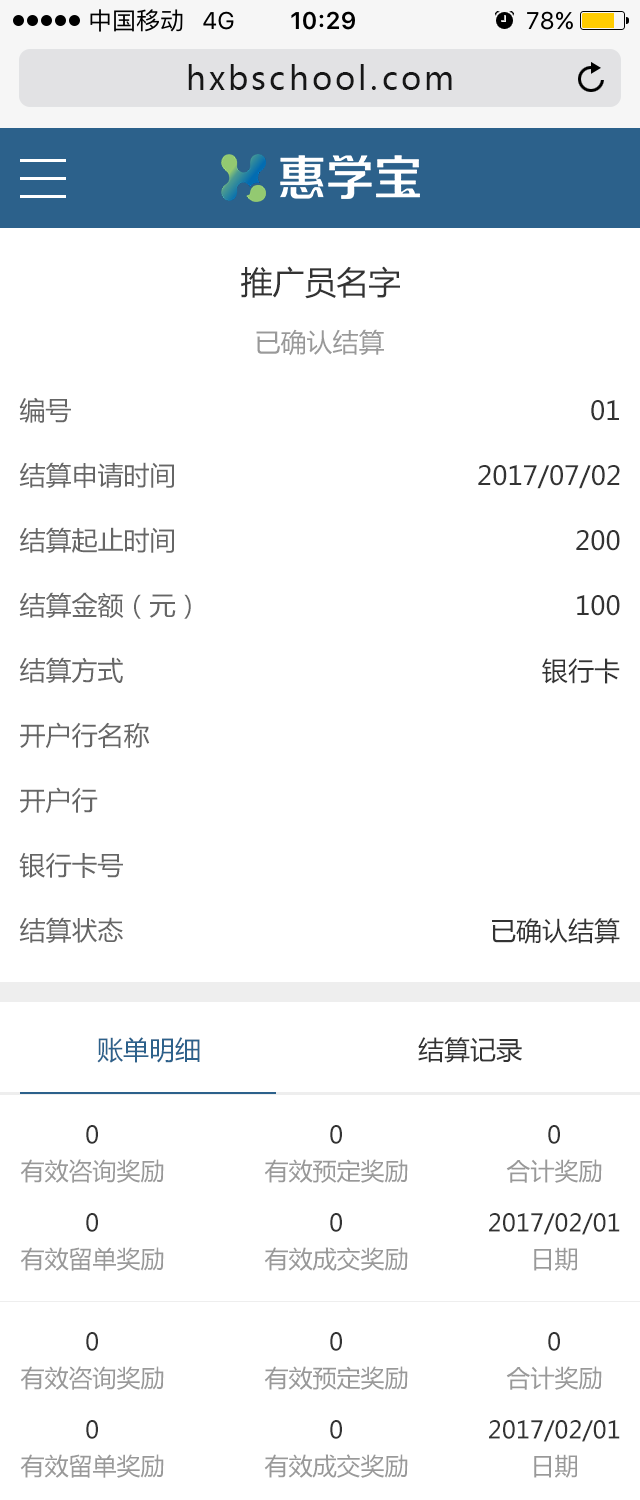
<style>
.page{position:relative;width:640px;height:1500px;background:#ffffff}
.page>*{position:absolute;margin:0}
.t1{font:32px "MicrosoftYaHei";letter-spacing:0.1em;color:#171717}
.t2{font:32px "MicrosoftYaHei";color:#333333}
.t3{font:26px "MicrosoftYaHei";color:#999999}
.t4{font:26px "MicrosoftYaHei";color:#666666}
.t5{font:26px "MicrosoftYaHei";color:#333333}
.t6{font:26px "MicrosoftYaHei";color:#2c618b}
.t7{font:24px/36px "MicrosoftYaHei";color:#999999}
.t8{font:24px/36px "MicrosoftYaHei";color:#333333}
</style>
<div class="page">
<p class="t1" style="left:188px;top:64px;width:264px;height:26px">hxbschool.com</p>
<p class="t2" style="left:241px;top:266px;width:159px;height:33px">推广员名字</p>
<p class="t3" style="left:256px;top:329px;width:128px;height:27px">已确认结算</p>
<p class="t4" style="left:19px;top:397px;width:52px;height:26px">编号</p>
<p class="t5" style="left:591px;top:400px;width:28px;height:21px">01</p>
<p class="t4" style="left:19px;top:462px;width:155px;height:26px">结算申请时间</p>
<p class="t5" style="left:478px;top:465px;width:142px;height:24px">2017/07/02</p>
<p class="t4" style="left:19px;top:527px;width:155px;height:27px">结算起止时间</p>
<p class="t5" style="left:576px;top:530px;width:44px;height:21px">200</p>
<p class="t4" style="left:19px;top:592px;width:172px;height:27px">结算金额（元）</p>
<p class="t5" style="left:577px;top:595px;width:43px;height:21px">100</p>
<p class="t4" style="left:19px;top:657px;width:104px;height:26px">结算方式</p>
<p class="t5" style="left:542px;top:658px;width:78px;height:26px">银行卡</p>
<p class="t4" style="left:20px;top:722px;width:130px;height:27px">开户行名称</p>
<p class="t4" style="left:20px;top:787px;width:78px;height:27px">开户行</p>
<p class="t4" style="left:19px;top:852px;width:104px;height:26px">银行卡号</p>
<p class="t4" style="left:19px;top:917px;width:104px;height:26px">结算状态</p>
<p class="t5" style="left:492px;top:918px;width:128px;height:26px">已确认结算</p>
<p class="t6" style="left:97px;top:1037px;width:103px;height:26px">账单明细</p>
<p class="t5" style="left:418px;top:1037px;width:104px;height:26px">结算记录</p>
<p class="t7" style="left:20px;top:1125px;width:144px;height:58px;text-align:center"><span class="t8">0<br></span>有效咨询奖励</p>
<p class="t7" style="left:264px;top:1125px;width:144px;height:58px;text-align:center"><span class="t8">0<br></span>有效预定奖励</p>
<p class="t7" style="left:506px;top:1125px;width:96px;height:58px;text-align:center"><span class="t8">0<br></span>合计奖励</p>
<p class="t7" style="left:20px;top:1213px;width:144px;height:58px;text-align:center"><span class="t8">0<br></span>有效留单奖励</p>
<p class="t7" style="left:264px;top:1213px;width:144px;height:58px;text-align:center"><span class="t8">0<br></span>有效成交奖励</p>
<p class="t8" style="left:489px;top:1213px;width:131px;height:58px;text-align:center">2017/02/01<br><span class="t7">日期</span></p>
<p class="t7" style="left:20px;top:1332px;width:144px;height:58px;text-align:center"><span class="t8">0<br></span>有效咨询奖励</p>
<p class="t7" style="left:264px;top:1332px;width:144px;height:58px;text-align:center"><span class="t8">0<br></span>有效预定奖励</p>
<p class="t7" style="left:506px;top:1332px;width:96px;height:58px;text-align:center"><span class="t8">0<br></span>合计奖励</p>
<p class="t7" style="left:20px;top:1420px;width:144px;height:58px;text-align:center"><span class="t8">0<br></span>有效留单奖励</p>
<p class="t7" style="left:264px;top:1420px;width:144px;height:58px;text-align:center"><span class="t8">0<br></span>有效成交奖励</p>
<p class="t8" style="left:489px;top:1420px;width:131px;height:58px;text-align:center">2017/02/01<br><span class="t7">日期</span></p>
</div>
